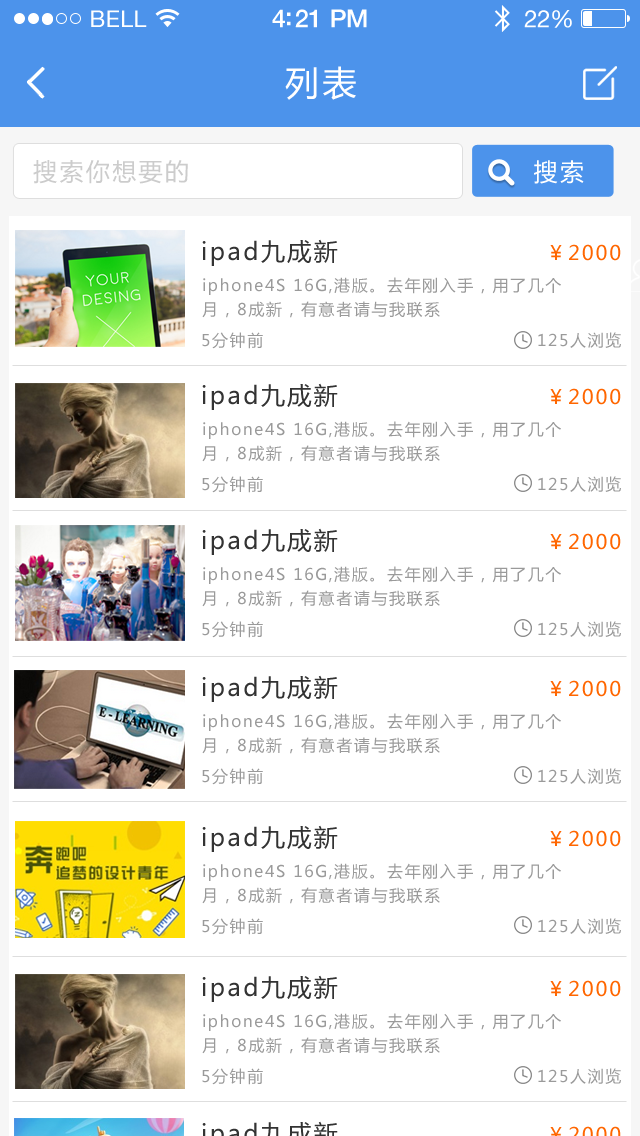
<style>
.page{position:relative;width:640px;height:1136px;background:#ffffff}
.page>*{position:absolute;margin:0}
.t1{font:23px "HelveticaNeue";letter-spacing:0.02em;color:#ffffff}
.t2{font:25px "HelveticaNeue-Medium";letter-spacing:-0.02em;color:#ffffff}
.t3{font:24px "HelveticaNeue";letter-spacing:-0.02em;color:#ffffff}
.t4{font:34px "MicrosoftYaHei";letter-spacing:0.1em;color:#ffffff}
.t5{font:24px "MicrosoftYaHei";letter-spacing:0.1em;color:#cccccc}
.t6{font:24px "MicrosoftYaHei";letter-spacing:0.1em;color:#ffffff}
.t7{font:24px "MicrosoftYaHei";letter-spacing:0.1em;color:#333333}
.t8{font:20px "MicrosoftYaHei";letter-spacing:0.1em;color:#ff6600}
.t9{font:20px "MicrosoftYaHei";letter-spacing:0.1em;color:#bababa}
.t10{font:16px/24px "MicrosoftYaHei";letter-spacing:0.1em;color:#9a9a9a}
.t11{font:16px "MicrosoftYaHei";letter-spacing:0.1em;color:#9a9a9a}
</style>
<div class="page">
<p class="t1" style="left:91px;top:10px;width:56px;height:17px">BELL</p>
<p class="t2" style="left:272px;top:9px;width:95px;height:19px">4:21 PM</p>
<p class="t3" style="left:524px;top:10px;width:48px;height:18px">22%</p>
<p class="t4" style="left:285px;top:66px;width:71px;height:34px">列表</p>
<p class="t5" style="left:33px;top:160px;width:155px;height:24px">搜索你想要的</p>
<p class="t6" style="left:534px;top:160px;width:50px;height:24px">搜索</p>
<p class="t7" style="left:202px;top:239px;width:136px;height:27px">ipad九成新</p>
<p class="t8" style="left:550px;top:244px;width:71px;height:17px">￥200<span class="t9">0</span></p>
<p class="t10" style="left:202px;top:277px;width:359px;height:41px">iphone4S 16G,港版。去年刚入手，用了几个<br>月，8成新，有意者请与我联系</p>
<p class="t11" style="left:202px;top:332px;width:61px;height:17px">5分钟前</p>
<p class="t11" style="left:538px;top:332px;width:83px;height:16px">125人浏览</p>
<p class="t7" style="left:202px;top:383px;width:136px;height:27px">ipad九成新</p>
<p class="t8" style="left:550px;top:388px;width:71px;height:17px">￥200<span class="t9">0</span></p>
<p class="t10" style="left:202px;top:421px;width:359px;height:41px">iphone4S 16G,港版。去年刚入手，用了几个<br>月，8成新，有意者请与我联系</p>
<p class="t11" style="left:202px;top:476px;width:61px;height:17px">5分钟前</p>
<p class="t11" style="left:538px;top:476px;width:83px;height:16px">125人浏览</p>
<p class="t7" style="left:202px;top:528px;width:136px;height:27px">ipad九成新</p>
<p class="t8" style="left:550px;top:533px;width:71px;height:17px">￥200<span class="t9">0</span></p>
<p class="t10" style="left:202px;top:566px;width:359px;height:41px">iphone4S 16G,港版。去年刚入手，用了几个<br>月，8成新，有意者请与我联系</p>
<p class="t11" style="left:202px;top:621px;width:61px;height:17px">5分钟前</p>
<p class="t11" style="left:538px;top:621px;width:83px;height:16px">125人浏览</p>
<p class="t7" style="left:202px;top:675px;width:136px;height:27px">ipad九成新</p>
<p class="t8" style="left:550px;top:680px;width:71px;height:17px">￥200<span class="t9">0</span></p>
<p class="t10" style="left:202px;top:713px;width:359px;height:41px">iphone4S 16G,港版。去年刚入手，用了几个<br>月，8成新，有意者请与我联系</p>
<p class="t11" style="left:202px;top:768px;width:61px;height:17px">5分钟前</p>
<p class="t11" style="left:538px;top:768px;width:83px;height:16px">125人浏览</p>
<p class="t7" style="left:202px;top:825px;width:136px;height:27px">ipad九成新</p>
<p class="t8" style="left:550px;top:830px;width:71px;height:17px">￥200<span class="t9">0</span></p>
<p class="t10" style="left:202px;top:863px;width:359px;height:41px">iphone4S 16G,港版。去年刚入手，用了几个<br>月，8成新，有意者请与我联系</p>
<p class="t11" style="left:202px;top:918px;width:61px;height:17px">5分钟前</p>
<p class="t11" style="left:538px;top:918px;width:83px;height:16px">125人浏览</p>
<p class="t7" style="left:202px;top:975px;width:136px;height:27px">ipad九成新</p>
<p class="t8" style="left:550px;top:980px;width:71px;height:17px">￥200<span class="t9">0</span></p>
<p class="t10" style="left:202px;top:1013px;width:359px;height:41px">iphone4S 16G,港版。去年刚入手，用了几个<br>月，8成新，有意者请与我联系</p>
<p class="t11" style="left:202px;top:1068px;width:61px;height:17px">5分钟前</p>
<p class="t11" style="left:538px;top:1068px;width:83px;height:16px">125人浏览</p>
</div>
